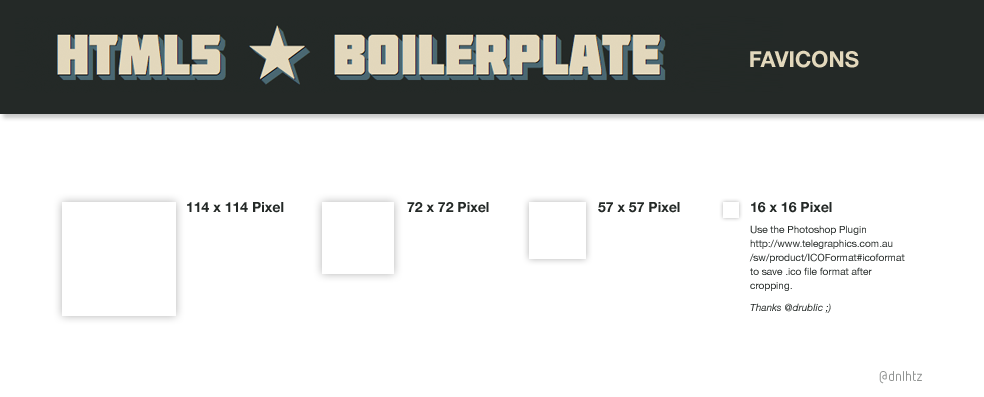
<style>
.page{position:relative;width:984px;height:397px;background:#ffffff}
.page>*{position:absolute;margin:0}
.t1{font:22px "HelveticaNeue-Bold";color:#e3d8bc}
.t2{font:14px "HelveticaNeue-Bold";color:#242927}
.t3{font:10px/14px "HelveticaNeue";color:#242927}
.t4{font:10px/22px "HelveticaNeue-Italic";color:#242927}
</style>
<div class="page">
<p class="t1" style="left:750px;top:50px;width:109px;height:18px">FAVICONS</p>
<p class="t2" style="left:187px;top:202px;width:97px;height:11px">114 x 114 Pixel</p>
<p class="t2" style="left:407px;top:202px;width:82px;height:11px">72 x 72 Pixel</p>
<p class="t2" style="left:598px;top:202px;width:82px;height:11px">57 x 57 Pixel</p>
<p class="t2" style="left:751px;top:202px;width:81px;height:11px">16 x 16 Pixel</p>
<p class="t3" style="left:749px;top:225px;width:156px;height:88px">Use the Photoshop Plugin<br>http://www.telegraphics.com.au<br>/sw/product/ICOFormat#icoformat<br>to save .ico file format after <br>cropping. <br><span class="t4">Thanks @drublic ;)</span></p>
</div>
